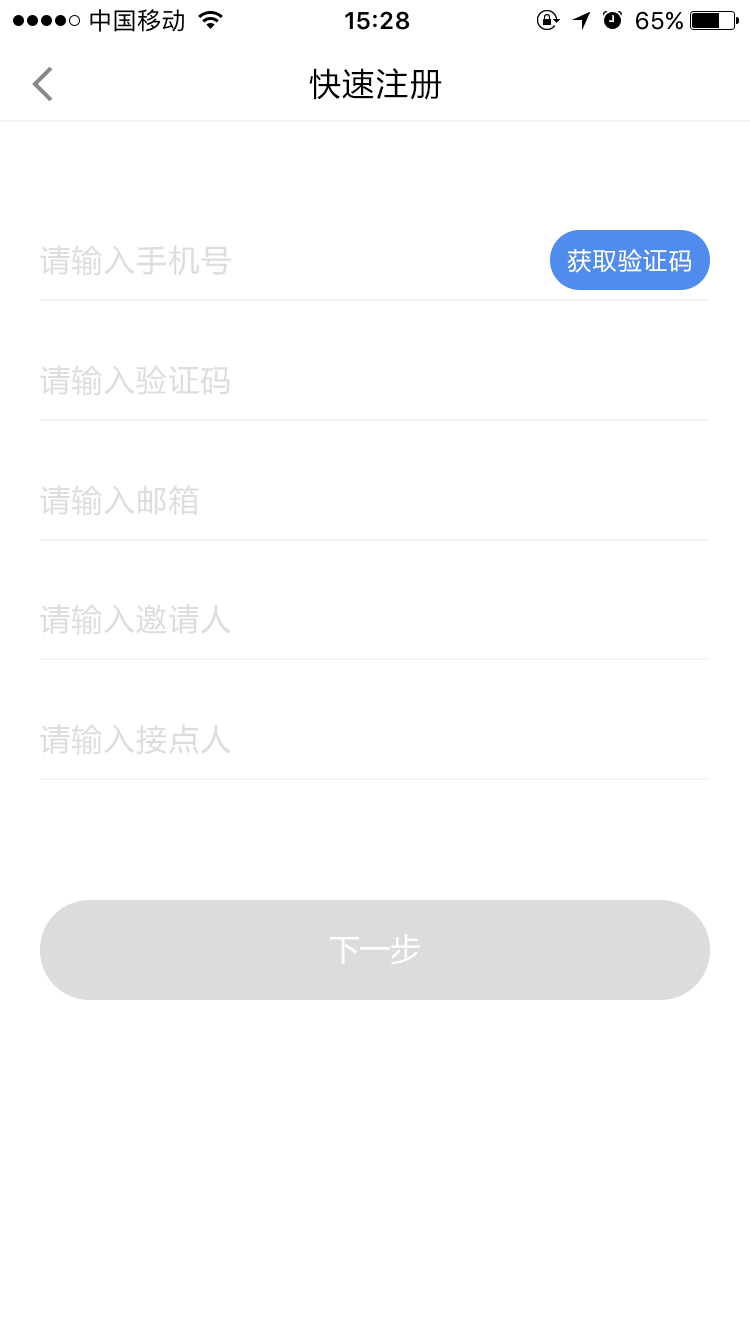
<style>
.page{position:relative;width:750px;height:1334px;background:#ffffff}
.page>*{position:absolute;margin:0}
.t1{font:32px "MicrosoftYaHei";letter-spacing:0.05em;color:#000000}
.t2{font:30.7px "MicrosoftYaHei";letter-spacing:0.05em;color:#dddddd}
.t3{font:24px "MicrosoftYaHei";letter-spacing:0.05em;color:#ffffff}
.t4{font:30.7px "MicrosoftYaHei";color:#ffffff}
</style>
<div class="page">
<p class="t1" style="left:309px;top:68px;width:133px;height:32px">快速注册</p>
<p class="t2" style="left:40px;top:245px;width:191px;height:31px">请输入手机号</p>
<p class="t3" style="left:567px;top:249px;width:124px;height:24px">获取验证码</p>
<p class="t2" style="left:40px;top:365px;width:190px;height:31px">请输入验证码</p>
<p class="t2" style="left:40px;top:485px;width:159px;height:31px">请输入邮箱</p>
<p class="t2" style="left:40px;top:604px;width:191px;height:31px">请输入邀请人</p>
<p class="t2" style="left:40px;top:724px;width:191px;height:31px">请输入接点人</p>
<p class="t4" style="left:330px;top:934px;width:90px;height:31px">下一步</p>
</div>
